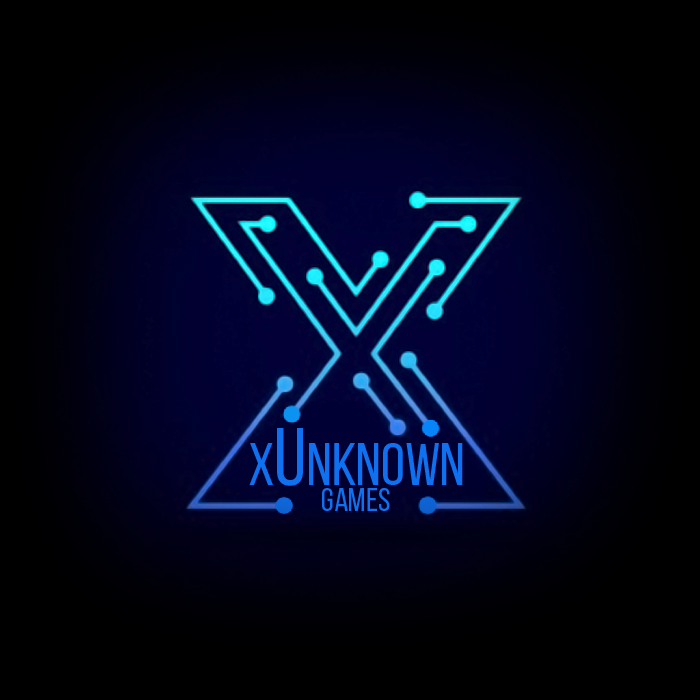
<style>
.page{position:relative;width:700px;height:700px}
.page>*{position:absolute;margin:0}
.t1{font:59.3px "BebasNeueRegular";color:#0f70f0}
.t2{font:81.9px "BebasNeueRegular";color:#0f70f0}
.t3{font:32.6px "BebasNeueRegular";color:#0f70f0}
</style>
<div class="page">
<p class="t1" style="left:249px;top:428px;width:214px;height:58px">x<span class="t2">U</span>nknown</p>
<p class="t3" style="left:322px;top:488px;width:68px;height:23px">games</p>
</div>
